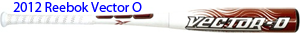
<style>
.page{position:relative;width:300px;height:33px;background:#ffffff}
.page>*{position:absolute;margin:0}
.t1{font:14px "MyriadPro-Regular";color:#0000ff}
</style>
<div class="page">
<p class="t1" style="left:13px;top:2px;width:129px;height:10px">2012 Reebok Vector O</p>
</div>
